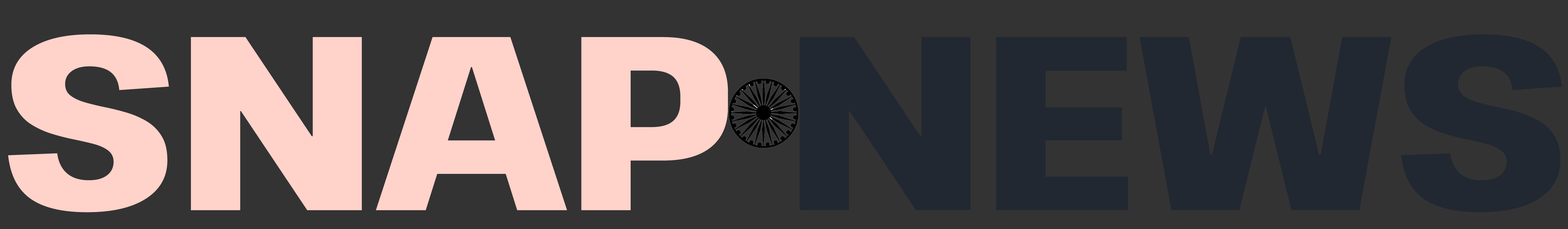
<style>
.page{position:relative;width:1568px;height:229px;background:#333333}
.page>*{position:absolute;margin:0}
.t1{font:247.5px "PathwayExtreme-ExtraBold";letter-spacing:-0.02em;color:#ffd2ca}
.t2{font:247.5px "PathwayExtreme-ExtraBold";letter-spacing:-0.02em;color:#222831}
</style>
<div class="page">
<p class="t1" style="left:8px;top:34px;width:1554px;height:179px">SNAP <span class="t2">NEWS</span></p>
</div>
